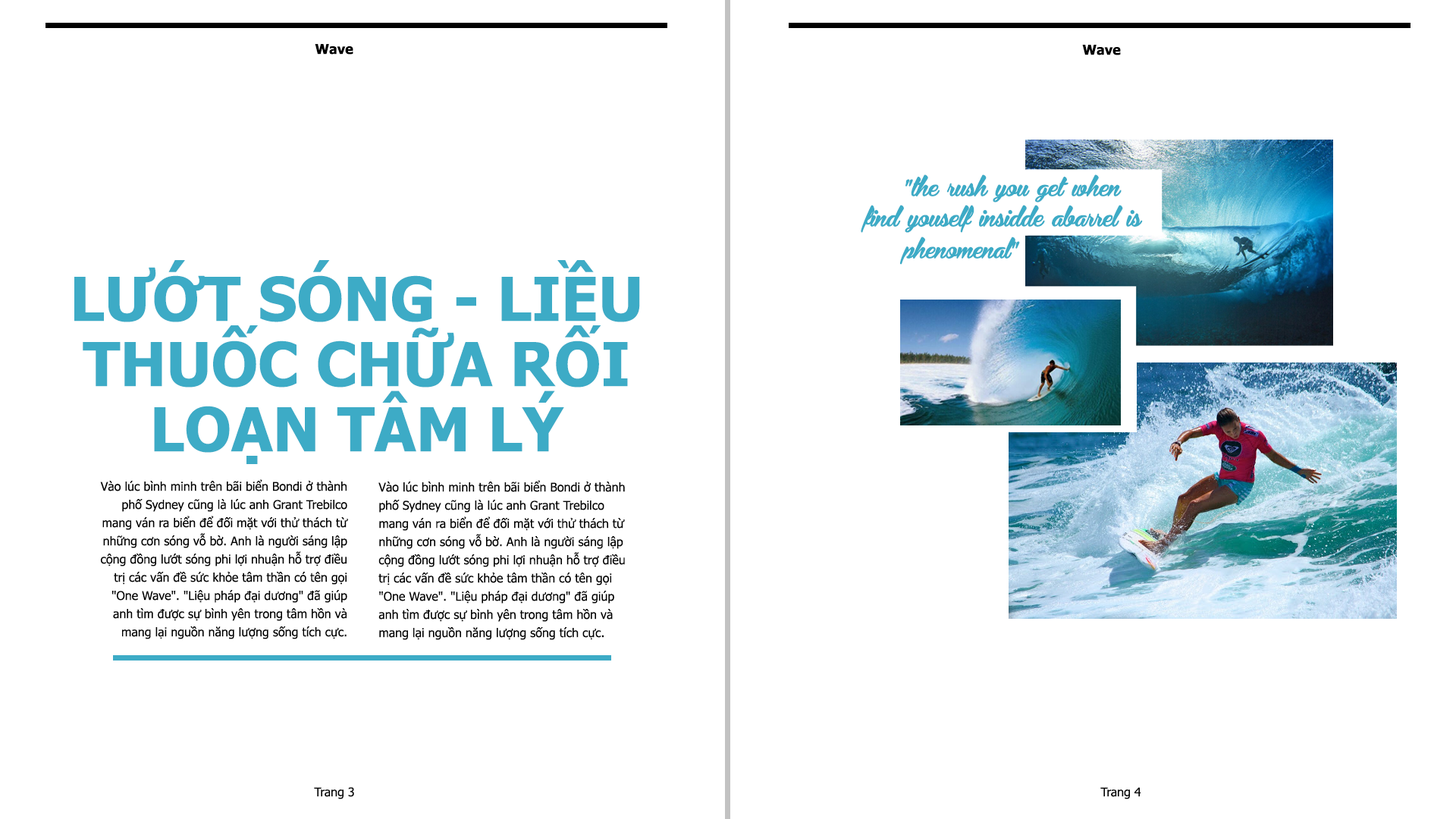
<style>
.page{position:relative;width:1456px;height:819px;background:#ffffff}
.page>*{position:absolute;margin:0}
.t1{font:13.6px "Tahoma-Bold";color:#000000}
.t2{font:22.7px "SVN-Bira";color:#3dabc6}
.t3{font:60.7px/65.2px "Tahoma-Bold";color:#3dabc6}
.t4{font:12.1px/18.2px "Tahoma";color:#000000}
.t5{font:12.1px "Tahoma";color:#000000}
</style>
<div class="page">
<p class="t1" style="left:315px;top:44px;width:38px;height:11px">Wave</p>
<p class="t1" style="left:1082px;top:45px;width:39px;height:10px">Wave</p>
<p class="t2" style="left:905px;top:174px;width:217px;height:28px">"the rush you get when</p>
<p class="t2" style="left:861px;top:205px;width:282px;height:28px">find youself insidde abarrel is</p>
<p class="t2" style="left:900px;top:237px;width:120px;height:28px">phenomenal"</p>
<p class="t3" style="left:74px;top:260px;width:566px;height:204px;text-align:center">LƯỚT SÓNG - LIỀU THUỐC CHỮA RỐI LOẠN TÂM LÝ</p>
<p class="t4" style="left:100px;top:479px;width:248px;height:160px;text-align:right">Vào lúc bình minh trên bãi biển Bondi ở thành phố Sydney cũng là lúc anh Grant Trebilco mang ván ra biển để đối mặt với thử thách từ những cơn sóng vỗ bờ. Anh là người sáng lập cộng đồng lướt sóng phi lợi nhuận hỗ trợ điều trị các vấn đề sức khỏe tâm thần có tên gọi "One Wave". "Liệu pháp đại dương" đã giúp anh tìm được sự bình yên trong tâm hồn và mang lại nguồn năng lượng sống tích cực.</p>
<p class="t4" style="left:378px;top:480px;width:247px;height:160px">Vào lúc bình minh trên bãi biển Bondi ở thành phố Sydney cũng là lúc anh Grant Trebilco mang ván ra biển để đối mặt với thử thách từ những cơn sóng vỗ bờ. Anh là người sáng lập cộng đồng lướt sóng phi lợi nhuận hỗ trợ điều trị các vấn đề sức khỏe tâm thần có tên gọi "One Wave". "Liệu pháp đại dương" đã giúp anh tìm được sự bình yên trong tâm hồn và mang lại nguồn năng lượng sống tích cực.</p>
<p class="t5" style="left:314px;top:787px;width:40px;height:12px">Trang 3</p>
<p class="t5" style="left:1100px;top:787px;width:41px;height:12px">Trang 4</p>
</div>
